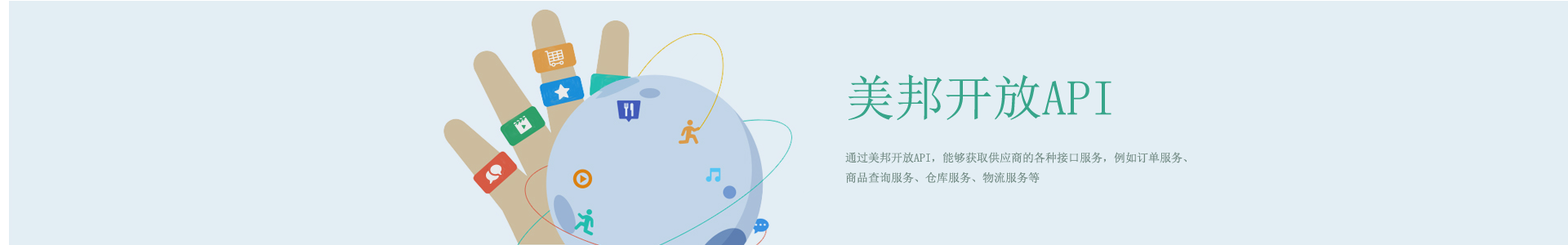
<style>
.page{position:relative;width:1568px;height:245px;background:#e3eef4}
.page>*{position:absolute;margin:0}
.t1{font:49px "SimSun";color:#37a58a}
.t2{font:11.4px "SimSun";color:#6f8881}
</style>
<div class="page">
<p class="t1" style="left:848px;top:74px;width:263px;height:46px">美邦开放API</p>
<p class="t2" style="left:845px;top:152px;width:342px;height:31px">通过美邦开放API，能够获取供应商的各种接口服务，例如订单服务、<br>商品查询服务、仓库服务、物流服务等</p>
</div>
